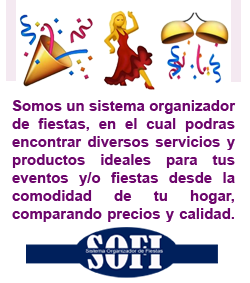
<style>
.page{position:relative;width:250px;height:283px;background:#ffffff}
.page>*{position:absolute;margin:0}
.t1{font:15px "Arial-BoldMT";color:#6d066c}
</style>
<div class="page">
<p class="t1" style="left:12px;top:100px;width:224px;height:122px;text-align:justify">Somos un sistema organizador de fiestas, en el cual podras encontrar diversos servicios y productos ideales para tus                              eventos y/o fiestas desde la comodidad de tu hogar, comparando precios y calidad.</p>
</div>
